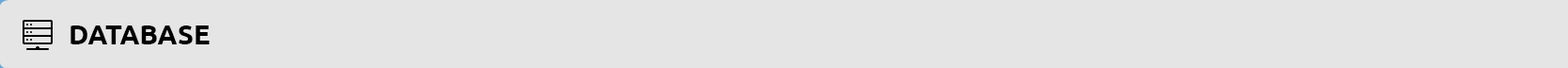
<style>
.page{position:relative;width:1568px;height:68px;background:#e5e5e5}
.page>*{position:absolute;margin:0}
.t1{font:27.3px "Ubuntu-Bold";color:#000000}
</style>
<div class="page">
<p class="t1" style="left:71px;top:25px;width:139px;height:19px">DATABASE</p>
</div>
